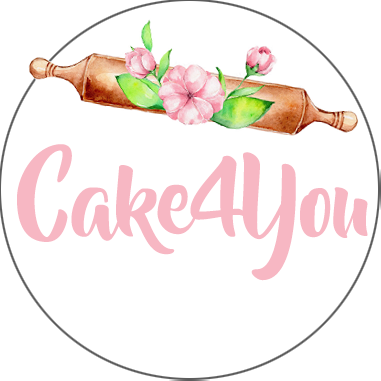
<style>
.page{position:relative;width:381px;height:381px;background:#ffffff}
.page>*{position:absolute;margin:0}
.t1{font:91.5px "BeyondTheMountains";letter-spacing:-0.02em;color:#f7b7c3}
</style>
<div class="page">
<p class="t1" style="left:17px;top:144px;width:351px;height:137px">Cake4You</p>
</div>
